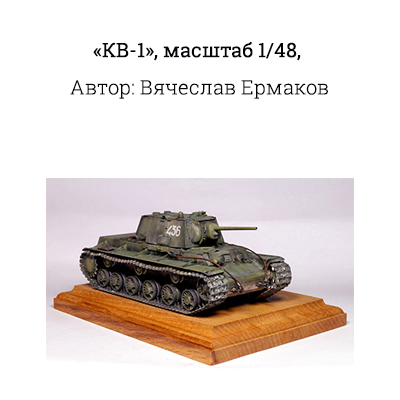
<style>
.page{position:relative;width:400px;height:400px;background:#ffffff}
.page>*{position:absolute;margin:0}
.t1{font:20px/30px "RobotoSlab-Light";color:#040308}
.t2{font:20px/30px "RobotoSlab-Regular";color:#040308}
</style>
<div class="page">
<p class="t1" style="left:70px;top:42px;width:258px;height:57px;text-align:center"><span class="t2">«КВ-1», масштаб 1/48, <br></span>Автор: Вячеслав Ермаков</p>
</div>
